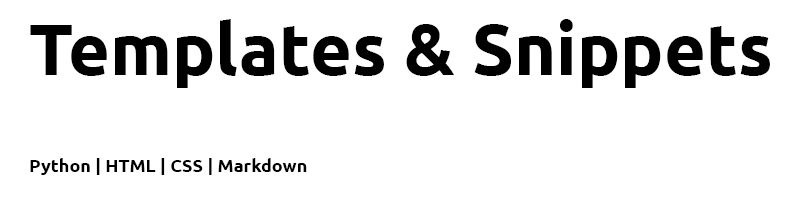
<style>
.page{position:relative;width:800px;height:200px;background:#ffffff}
.page>*{position:absolute;margin:0}
.t1{font:72px "UbuntuNerdFontComplete-Bold";color:#000000}
.t2{font:18px "UbuntuNerdFontComplete-Bold";color:#000000}
</style>
<div class="page">
<p class="t1" style="left:30px;top:19px;width:740px;height:69px">Templates &amp; Snippets</p>
<p class="t2" style="left:30px;top:158px;width:277px;height:17px">Python | HTML | CSS | Markdown</p>
</div>
